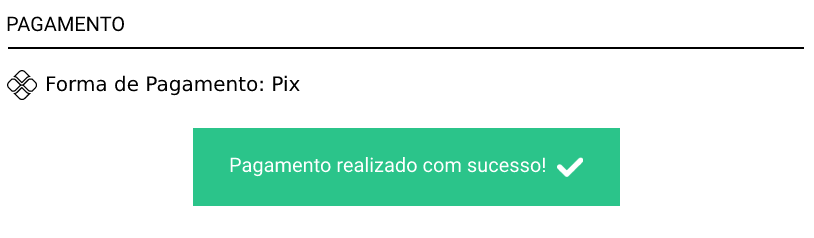
<style>
.page{position:relative;width:814px;height:238px;background:#ffffff}
.page>*{position:absolute;margin:0}
.t1{font:20px "Roboto-Regular";color:#000000}
.t2{font:20px "DejaVuSans";color:#000000}
.t3{font:20px "Roboto-Regular";color:#ffffff}
</style>
<div class="page">
<p class="t1" style="left:7px;top:16px;width:117px;height:16px">PAGAMENTO</p>
<p class="t2" style="left:46px;top:75px;width:254px;height:21px">Forma de Pagamento: Pix</p>
<p class="t3" style="left:230px;top:157px;width:316px;height:20px">Pagamento realizado com sucesso!</p>
</div>
